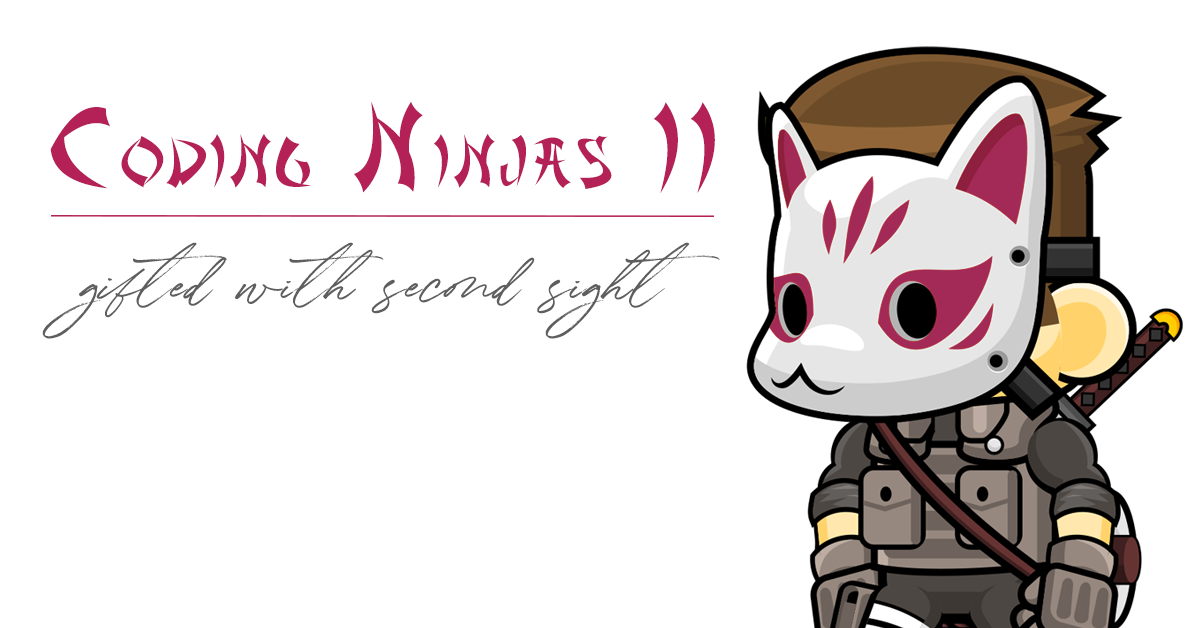
<style>
.page{position:relative;width:1196px;height:628px;background:#ffffff}
.page>*{position:absolute;margin:0}
.t1{font:66.3px "AsianDelight";letter-spacing:0.1em;color:#b42157;scale:0.93 1}
.t2{font:110.5px "AsianDelight";letter-spacing:0.1em;color:#b42157;scale:0.93 1}
.t3{font:40px/76.6px "Winterlady";color:#5e5e5e;font-weight:bold}
</style>
<div class="page">
<p class="t1" style="left:50px;top:101px;width:665px;height:92px"><span class="t2">C</span>ODING<span class="t2"> N</span>INJAS<span class="t2"> II</span></p>
<p class="t3" style="left:42px;top:242px;width:678px;height:97px">gifted with second sight</p>
</div>
